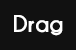
<style>
.page{position:relative;width:76px;height:50px;background:#111111}
.page>*{position:absolute;margin:0}
.t1{font:24px "Champagne&Limousines-Bold";letter-spacing:0.02em;color:#ffffff}
</style>
<div class="page">
<p class="t1" style="left:14px;top:15px;width:49px;height:21px">Drag</p>
</div>
